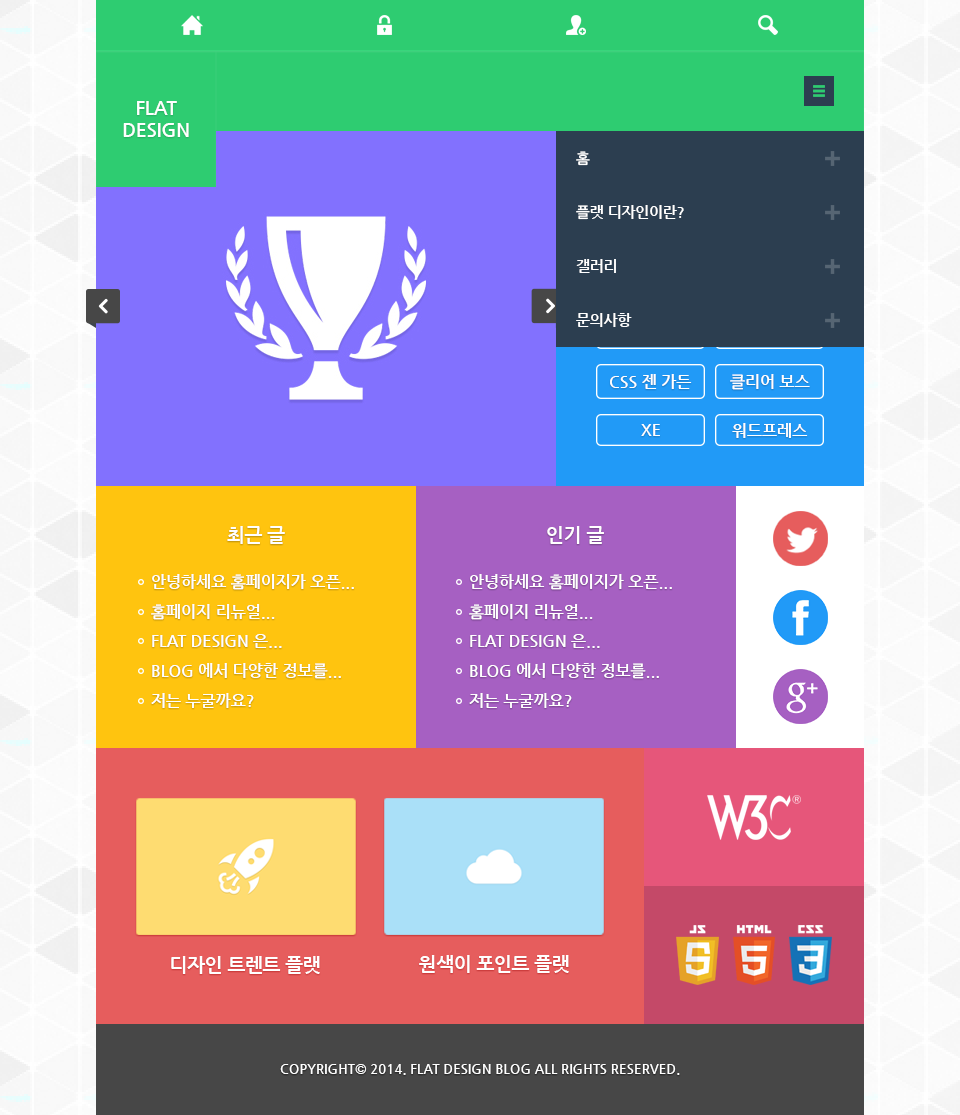
<style>
.page{position:relative;width:960px;height:1115px}
.page>*{position:absolute;margin:0}
.t1{font:18.7px "NanumGothicBold";color:#ffffff}
.t2{font:14.7px "NanumGothicBold";color:#ffffff}
.t3{font:16px "NanumGothicBold";color:#ffffff}
.t4{font:13.3px "NanumGothicBold";color:#ffffff}
</style>
<div class="page">
<p class="t1" style="left:123px;top:101px;width:66px;height:36px;text-align:center">FLAT<br>DESIGN</p>
<p class="t2" style="left:576px;top:151px;width:14px;height:15px">홈</p>
<p class="t2" style="left:576px;top:205px;width:108px;height:15px">플랫 디자인이란?</p>
<p class="t2" style="left:576px;top:259px;width:40px;height:14px">갤러리</p>
<p class="t2" style="left:576px;top:313px;width:56px;height:14px">문의사항</p>
<p class="t3" style="left:610px;top:374px;width:82px;height:15px">CSS 젠 가든</p>
<p class="t3" style="left:730px;top:374px;width:80px;height:16px">클리어 보스</p>
<p class="t3" style="left:641px;top:424px;width:19px;height:12px">XE</p>
<p class="t3" style="left:732px;top:423px;width:76px;height:15px">워드프레스</p>
<p class="t1" style="left:227px;top:526px;width:58px;height:18px">최근 글</p>
<p class="t1" style="left:547px;top:526px;width:57px;height:18px">인기 글</p>
<p class="t3" style="left:152px;top:574px;width:202px;height:16px">안녕하세요 홈페이지가 오픈...</p>
<p class="t3" style="left:470px;top:574px;width:202px;height:16px">안녕하세요 홈페이지가 오픈...</p>
<p class="t3" style="left:151px;top:604px;width:124px;height:16px">홈페이지 리뉴얼...</p>
<p class="t3" style="left:469px;top:604px;width:124px;height:16px">홈페이지 리뉴얼...</p>
<p class="t3" style="left:152px;top:634px;width:130px;height:14px">FLAT DESIGN 은...</p>
<p class="t3" style="left:470px;top:634px;width:130px;height:14px">FLAT DESIGN 은...</p>
<p class="t3" style="left:152px;top:663px;width:189px;height:16px">BLOG 에서 다양한 정보를...</p>
<p class="t3" style="left:470px;top:663px;width:189px;height:16px">BLOG 에서 다양한 정보를...</p>
<p class="t3" style="left:151px;top:693px;width:103px;height:15px">저는 누굴까요?</p>
<p class="t3" style="left:469px;top:693px;width:103px;height:15px">저는 누굴까요?</p>
<p class="t1" style="left:171px;top:956px;width:149px;height:18px">디자인 트렌트 플랫</p>
<p class="t1" style="left:419px;top:955px;width:150px;height:18px">원색이 포인트 플랫</p>
<p class="t4" style="left:280px;top:1064px;width:400px;height:11px">COPYRIGHT© 2014. FLAT DESIGN BLOG ALL RIGHTS RESERVED.</p>
</div>
